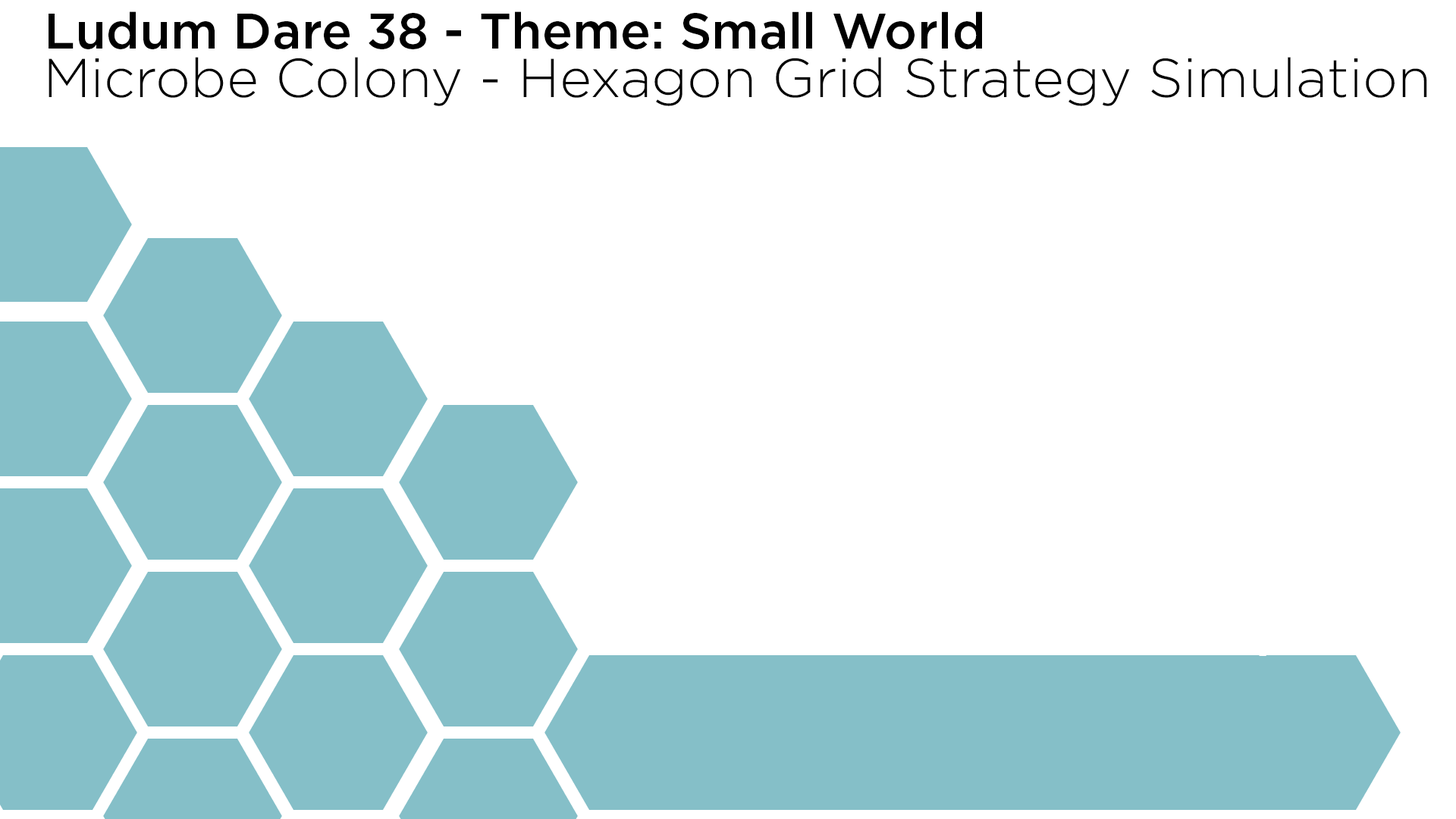
<style>
.page{position:relative;width:1456px;height:819px;background:#ffffff}
.page>*{position:absolute;margin:0}
.t1{font:50px "Gotham-Medium";color:#000000}
.t2{font:54.6px "Gotham-Light";color:#000000}
</style>
<div class="page">
<p class="t1" style="left:49px;top:11px;width:933px;height:38px">Ludum Dare 38 - Theme: Small World</p>
<p class="t2" style="left:49px;top:57px;width:1378px;height:49px">Microbe Colony - Hexagon Grid Strategy Simulation</p>
</div>
